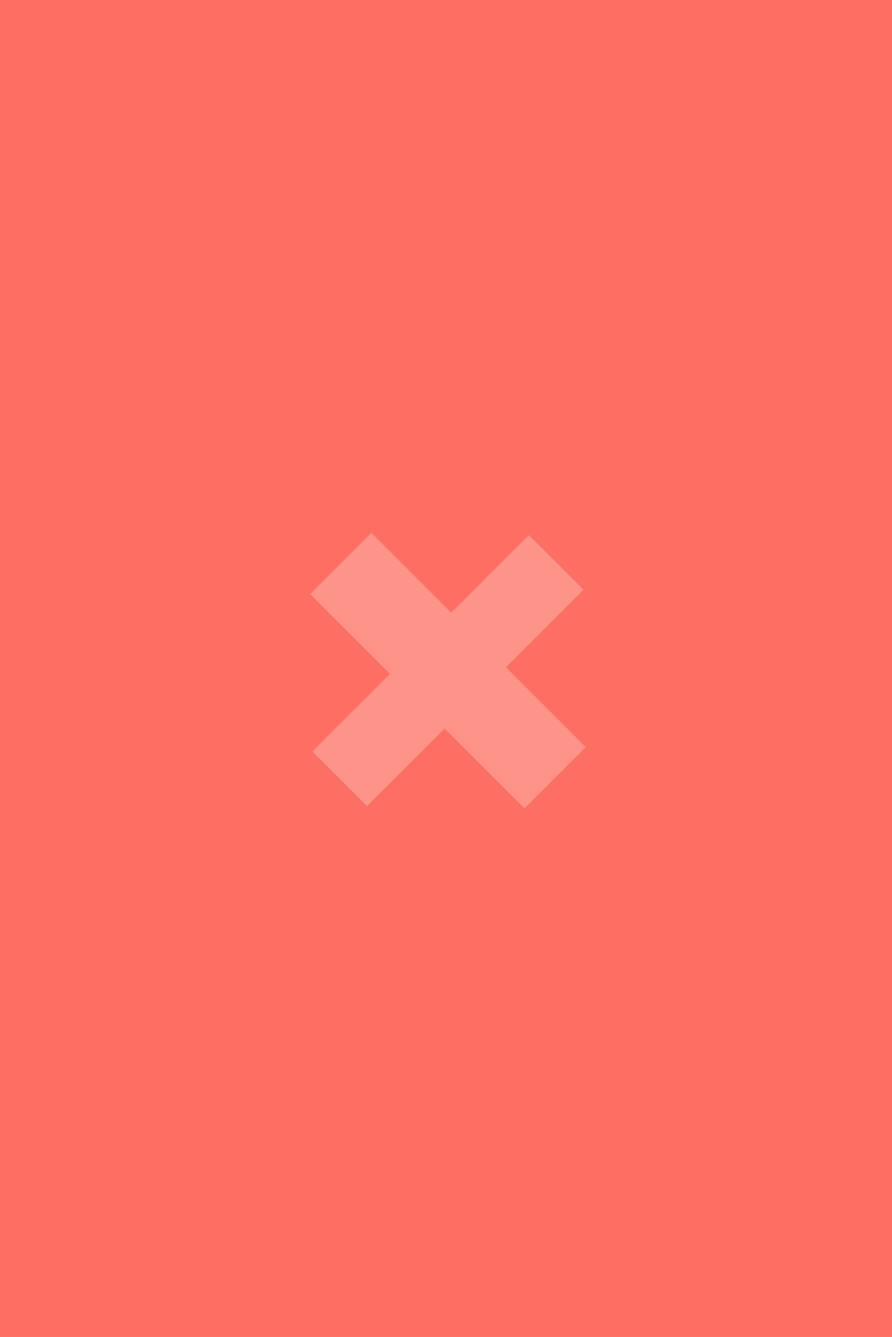
<style>
.page{position:relative;width:892px;height:1337px;background:#fd6f63}
.page>*{position:absolute;margin:0}
.t1{font:626.9px "Montserrat-Bold";letter-spacing:0.1em;color:#fe938a}
</style>
<div class="page">
<p class="t1" style="left:310px;top:533px;width:276px;height:276px;rotate:-45deg">+</p>
</div>
